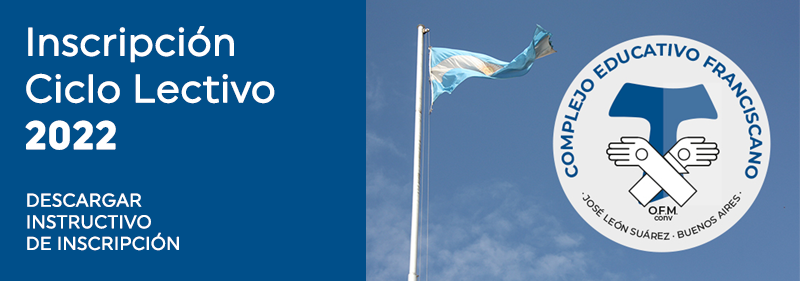
<style>
.page{position:relative;width:800px;height:281px;background:#004f8a}
.page>*{position:absolute;margin:0}
.t1{font:38.9px "Uniform";color:#ffffff;font-weight:bold}
.t2{font:38.9px "Uniform-Bold";color:#ffffff;font-weight:bold}
.t3{font:18px "Uniform";color:#ffffff;font-weight:bold}
</style>
<div class="page">
<p class="t1" style="left:25px;top:26px;width:250px;height:124px">Inscripción <br>Ciclo Lectivo <br><span class="t2">2022</span></p>
<p class="t3" style="left:27px;top:193px;width:152px;height:58px">DESCARGAR <br>INSTRUCTIVO <br>DE INSCRIPCIÓN</p>
</div>
